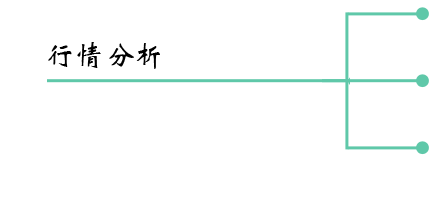
<style>
.page{position:relative;width:444px;height:200px;background:#ffffff}
.page>*{position:absolute;margin:0}
.t1{font:30px "STXinwei";color:#000000}
</style>
<div class="page">
<p class="t1" style="left:48px;top:42px;width:112px;height:27px">行情分析</p>
</div>
